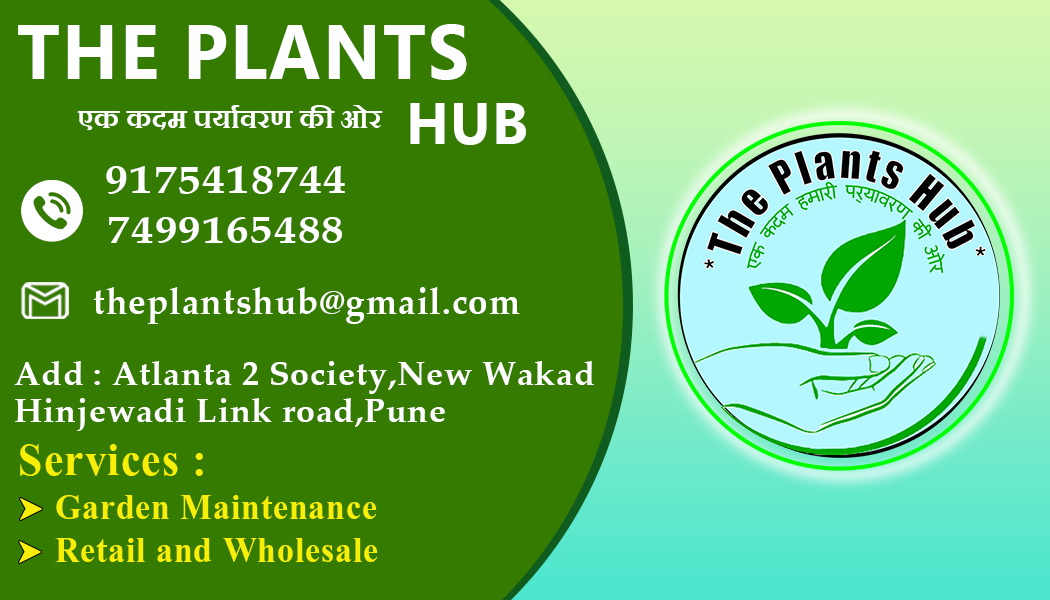
<style>
.page{position:relative;width:1050px;height:600px;background:#347b00}
.page>*{position:absolute;margin:0}
.t1{font:77.3px "MicrosoftTaiLe-Bold";letter-spacing:0.025em;color:#ffffff;scale:0.95 1}
.t2{font:31.7px "Aparajita-Bold";letter-spacing:0.025em;color:#ffffff;scale:0.95 1}
.t3{font:59px "MicrosoftTaiLe-Bold";letter-spacing:0.025em;color:#ffffff;scale:0.95 1}
.t4{font:38.9px "PalatinoLinotype-Bold";letter-spacing:0.025em;color:#ffffff;scale:1.19 1}
.t5{font:38.2px "PalatinoLinotype-Bold";letter-spacing:0.025em;color:#ffffff;scale:1.19 1}
.t6{font:37.2px "PalatinoLinotype-Bold";letter-spacing:0.025em;color:#ffffff;scale:0.95 1}
.t7{font:33.5px/37.5px "PalatinoLinotype-Bold";letter-spacing:0.025em;color:#ffffff}
.t8{font:56.3px "Aparajita-Bold";letter-spacing:0.025em;color:#f7ef0a;scale:0.95 1}
.t9{font:43.8px "Aparajita-Bold";letter-spacing:0.025em;color:#f7ef0a;scale:0.95 1}
</style>
<div class="page">
<p class="t1" style="left:18px;top:24px;width:449px;height:56px">THE PLANTS</p>
<p class="t2" style="left:77px;top:105px;width:306px;height:25px">एक कदम पर्यावरण की ओर</p>
<p class="t3" style="left:410px;top:103px;width:116px;height:42px">HUB</p>
<p class="t4" style="left:106px;top:166px;width:239px;height:28px">9175418744</p>
<p class="t5" style="left:109px;top:217px;width:233px;height:26px">7499165488</p>
<p class="t6" style="left:93px;top:287px;width:427px;height:37px">theplantshub@gmail.com</p>
<p class="t7" style="left:14px;top:361px;width:580px;height:70px">Add : Atlanta 2 Society,New Wakad<br>Hinjewadi Link road,Pune</p>
<p class="t8" style="left:20px;top:444px;width:183px;height:32px">Services :</p>
<p class="t9" style="left:56px;top:495px;width:321px;height:24px">Garden Maintenance</p>
<p class="t9" style="left:55px;top:538px;width:323px;height:24px">Retail and Wholesale</p>
</div>
